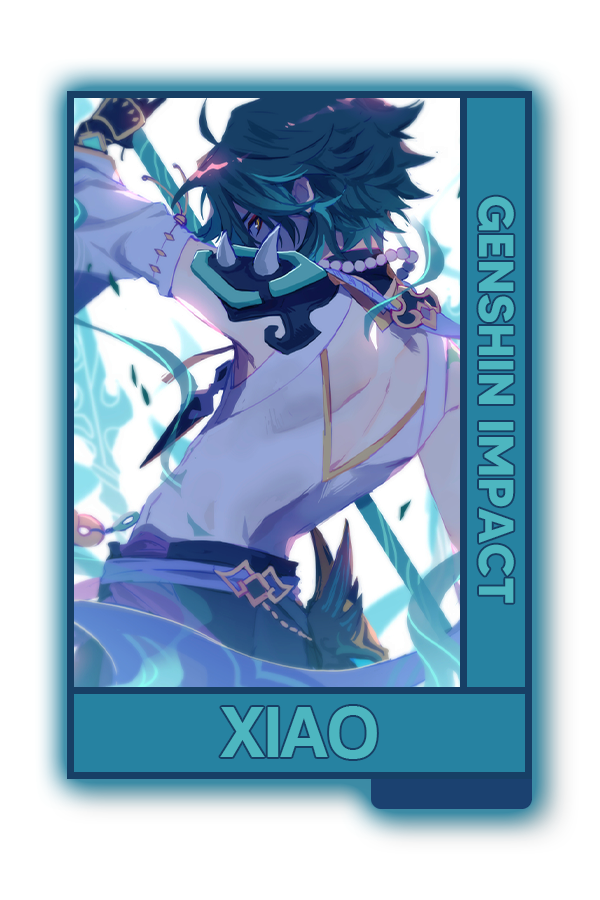
<style>
.page{position:relative;width:600px;height:900px;background:#ffffff}
.page>*{position:absolute;margin:0}
.t1{font:48.8px "MADETOMMY-Bold";color:#4db6c0}
.t2{font:75px "CoolveticaRg-Regular";color:#4db6c0}
</style>
<div class="page">
<p class="t1" style="left:478px;top:196px;width:36px;height:407px;rotate:90deg">GENSHIN IMPACT</p>
<p class="t2" style="left:220px;top:706px;width:157px;height:53px">XIAO</p>
</div>
